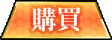
<style>
.page{position:relative;width:112px;height:40px}
.page>*{position:absolute;margin:0}
.t1{font:26px "RyuminPr6N-ExBold";color:#fffffa}
</style>
<div class="page">
<p class="t1" style="left:31px;top:7px;width:50px;height:25px">購買</p>
</div>
